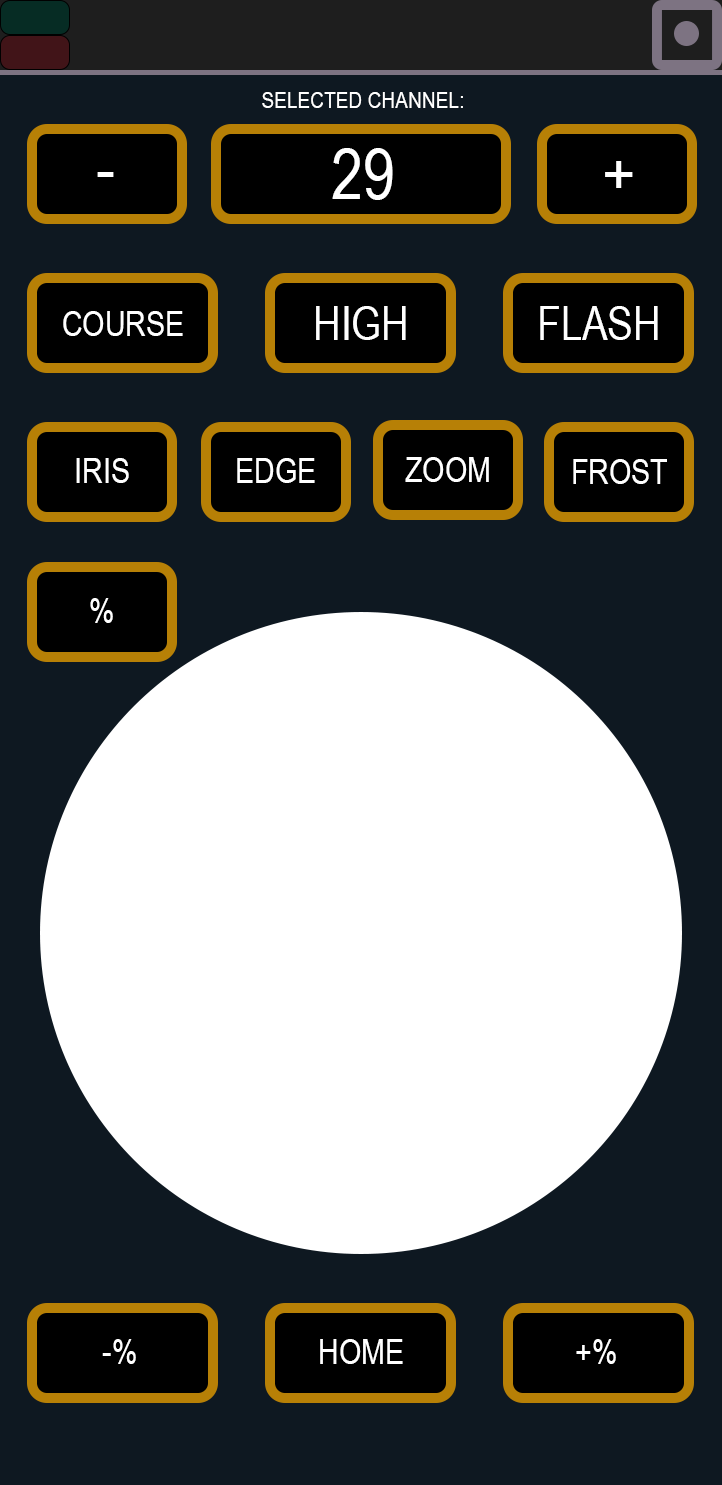
<style>
.page{position:relative;width:722px;height:1485px;background:#0e1821}
.page>*{position:absolute;margin:0}
.t1{font:23.3px "ArialNarrow";color:#ffffff}
.t2{font:70px "ArialNarrow";color:#ffffff}
.t3{font:35px "ArialNarrow";color:#ffffff}
.t4{font:46.7px "ArialNarrow";color:#ffffff}
</style>
<div class="page">
<p class="t1" style="left:262px;top:92px;width:201px;height:16px">SELECTED CHANNEL:</p>
<p class="t2" style="left:332px;top:148px;width:61px;height:52px">29</p>
<p class="t2" style="left:605px;top:161px;width:28px;height:27px">+</p>
<p class="t2" style="left:97px;top:172px;width:17px;height:5px">-</p>
<p class="t3" style="left:63px;top:311px;width:120px;height:25px">COURSE</p>
<p class="t4" style="left:316px;top:306px;width:90px;height:34px">HIGH</p>
<p class="t4" style="left:540px;top:306px;width:118px;height:34px">FLASH</p>
<p class="t3" style="left:76px;top:458px;width:53px;height:25px">IRIS</p>
<p class="t3" style="left:237px;top:458px;width:78px;height:25px">EDGE</p>
<p class="t3" style="left:405px;top:457px;width:84px;height:25px">ZOOM</p>
<p class="t3" style="left:573px;top:459px;width:94px;height:25px">FROST</p>
<p class="t3" style="left:90px;top:598px;width:23px;height:25px">%</p>
<p class="t3" style="left:102px;top:1339px;width:34px;height:25px">-%</p>
<p class="t3" style="left:320px;top:1339px;width:83px;height:25px">HOME</p>
<p class="t3" style="left:576px;top:1339px;width:40px;height:25px">+%</p>
</div>
